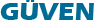
<style>
.page{position:relative;width:94px;height:20px;background:#ffffff}
.page>*{position:absolute;margin:0}
.t1{font:25px "ErasITC-Bold";color:#006c95}
</style>
<div class="page">
<p class="t1" style="left:0px;top:0px;width:94px;height:20px">GÜVEN</p>
</div>
